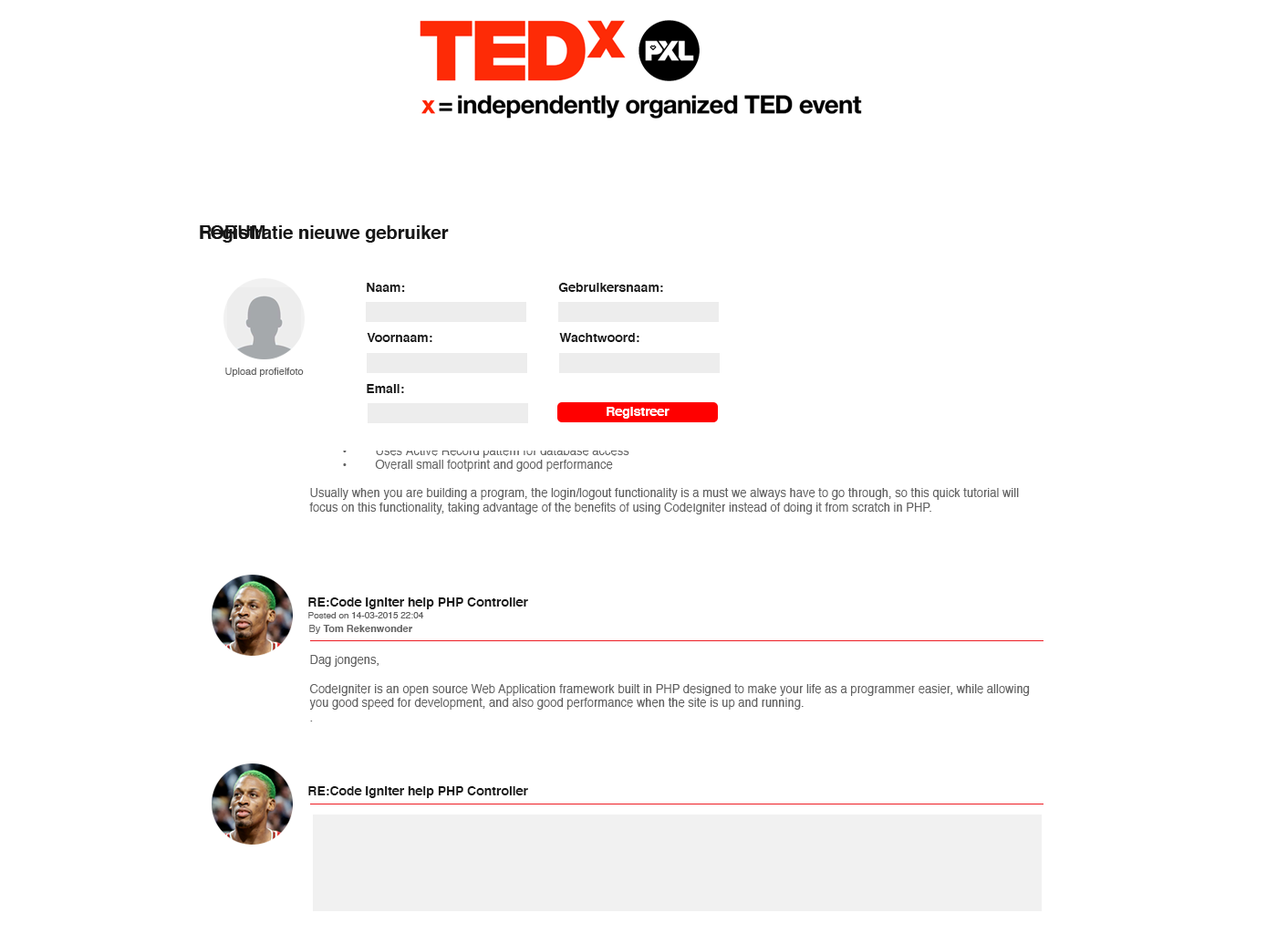
<style>
.page{position:relative;width:1277px;height:934px;background:#ffffff}
.page>*{position:absolute;margin:0}
.t1{font:18.2px "Helvetica-Bold";color:#171717}
.t2{font:12.8px "Helvetica-Bold";color:#171717}
.t3{font:11.9px "Helvetica"}
.t4{font:10px "Helvetica";color:#626262}
.t5{font:12.8px "Helvetica-Bold";color:#ffffff}
.t6{font:9.1px "Helvetica";color:#626262}
.t7{font:10px "Helvetica-Bold";color:#626262}
.t8{font:11.9px "Helvetica";color:#626262}
</style>
<div class="page">
<p class="t1" style="left:200px;top:225px;width:65px;height:14px">FORUM</p>
<p class="t1" style="left:200px;top:225px;width:249px;height:18px">Registratie nieuwe gebruiker</p>
<p class="t2" style="left:367px;top:283px;width:38px;height:9px">Naam:</p>
<p class="t2" style="left:558px;top:283px;width:105px;height:9px">Gebruikersnaam:</p>
<p class="t2" style="left:367px;top:333px;width:65px;height:9px">Voornaam:</p>
<p class="t2" style="left:559px;top:333px;width:80px;height:9px">Wachtwoord:</p>
<p class="t3" style="left:309px;top:346px;width:721px;height:168px">Dag jongens,<br><br>CodeIgniter is an open source Web Application framework built in PHP designed to make your life as a programmer easier, while allowing you good speed for development, and also good performance when the site is up and running.<br>Being a Java developer for over 10 years, when I had to move to PHP I chose CodeIgniter for the following reasons:<br> • Easy to install and configure (being a newbie in PHP this was crucial)<br> • Clean and elegant MVC implementation<br> • Uses Active Record pattern for database access<br> • Overall small footprint and good performance<br><br>Usually when you are building a program, the login/logout functionality is a must we always have to go through, so this quick tutorial will focus on this functionality, taking advantage of the benefits of using CodeIgniter instead of doing it from scratch in PHP.</p>
<p class="t4" style="left:225px;top:368px;width:79px;height:9px">Upload profielfoto</p>
<p class="t2" style="left:367px;top:384px;width:37px;height:9px">Email:</p>
<p class="t5" style="left:606px;top:407px;width:63px;height:12px">Registreer</p>
<p class="t2" style="left:308px;top:597px;width:220px;height:12px">RE:Code Igniter help PHP Controller</p>
<p class="t6" style="left:308px;top:612px;width:116px;height:6px">Posted on 14-03-2015 22:04</p>
<p class="t7" style="left:309px;top:625px;width:103px;height:9px"><span class="t4">By </span>Tom Rekenwonder</p>
<p class="t8" style="left:309px;top:655px;width:721px;height:66px">Dag jongens,<br><br>CodeIgniter is an open source Web Application framework built in PHP designed to make your life as a programmer easier, while allowing you good speed for development, and also good performance when the site is up and running.<br>.</p>
<p class="t2" style="left:308px;top:786px;width:220px;height:12px">RE:Code Igniter help PHP Controller</p>
</div>
